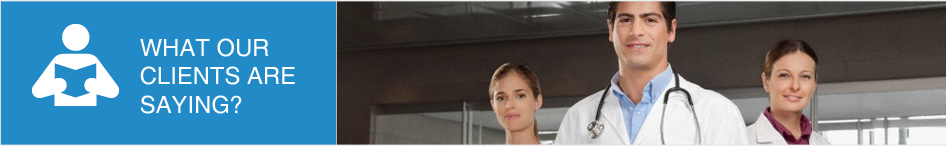
<style>
.page{position:relative;width:946px;height:146px;background:#228ac7}
.page>*{position:absolute;margin:0}
.t1{font:23.8px "Helvetica";color:#ffffff;text-transform:uppercase}
</style>
<div class="page">
<p class="t1" style="left:140px;top:38px;width:155px;height:76px">What Our <br>clientS ARE <br>saying?</p>
</div>
